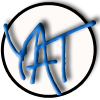
<style>
.page{position:relative;width:100px;height:100px;background:#fdfaf8}
.page>*{position:absolute;margin:0}
.t1{font:91.7px "TallPaul"}
</style>
<div class="page">
<p class="t1" style="left:3px;top:20px;width:93px;height:76px">YAT</p>
</div>
